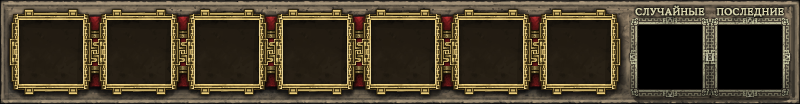
<style>
.page{position:relative;width:800px;height:104px}
.page>*{position:absolute;margin:0}
.t1{font:9.5px "CooperMediumCBT";letter-spacing:0.03em;color:#dbd7af;text-transform:uppercase;font-weight:bold}
</style>
<div class="page">
<p class="t1" style="left:635px;top:5px;width:70px;height:11px">случайные</p>
<p class="t1" style="left:716px;top:8px;width:68px;height:9px">последние</p>
</div>
